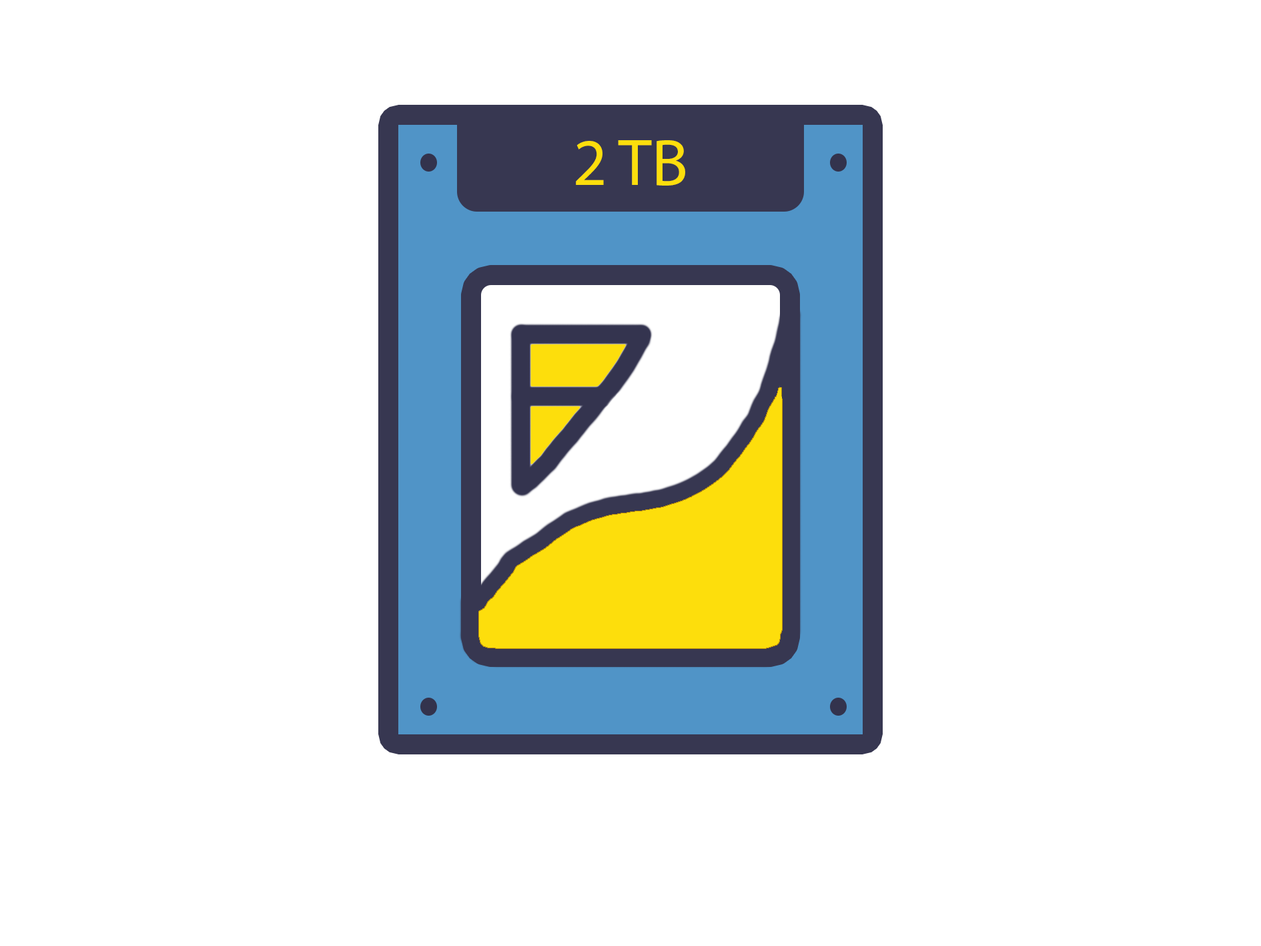
<style>
.page{position:relative;width:1261px;height:946px;background:#ffffff}
.page>*{position:absolute;margin:0}
.t1{font:66.7px "MyriadPro-Regular";color:#fdde0c}
</style>
<div class="page">
<p class="t1" style="left:576px;top:140px;width:109px;height:46px">2 TB</p>
</div>
